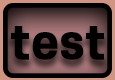
<style>
.page{position:relative;width:115px;height:80px;background:#000000}
.page>*{position:absolute;margin:0}
.t1{font:46.3px "S-CoreDream-6Bold";color:#000000;font-weight:bold}
</style>
<div class="page">
<p class="t1" style="left:11px;top:26px;width:93px;height:34px">test</p>
</div>
